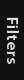
<style>
.page{position:relative;width:24px;height:80px;background:#111111}
.page>*{position:absolute;margin:0}
.t1{font:16px "MyriadPro-Semibold";letter-spacing:0.06em;color:#dddddd}
</style>
<div class="page">
<p class="t1" style="left:7px;top:17px;width:12px;height:47px;rotate:90deg">Filters</p>
</div>
